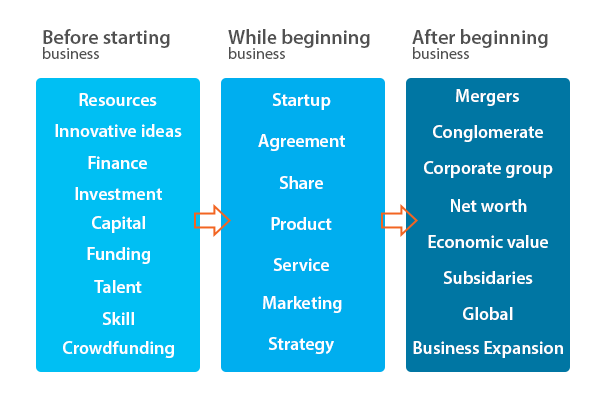
<style>
.page{position:relative;width:595px;height:420px;background:#ffffff}
.page>*{position:absolute;margin:0}
.t1{font:20px/14.8px "MyriadPro-Semibold";color:#515151}
.t2{font:16px/14.8px "MyriadPro-Regular";color:#515151}
.t3{font:18px "MyriadPro-Semibold";color:#ffffff}
</style>
<div class="page">
<p class="t1" style="left:43px;top:29px;width:127px;height:30px">Before starting<br><span class="t2">business</span></p>
<p class="t1" style="left:228px;top:29px;width:142px;height:30px">While beginning<br><span class="t2">business</span></p>
<p class="t1" style="left:412px;top:29px;width:136px;height:30px">After beginning<br><span class="t2">business</span></p>
<p class="t3" style="left:456px;top:89px;width:63px;height:17px">Mergers</p>
<p class="t3" style="left:79px;top:93px;width:78px;height:13px">Resources</p>
<p class="t3" style="left:272px;top:93px;width:59px;height:17px">Startup</p>
<p class="t3" style="left:55px;top:124px;width:127px;height:13px">Innovative ideas</p>
<p class="t3" style="left:433px;top:125px;width:110px;height:17px">Conglomerate</p>
<p class="t3" style="left:258px;top:134px;width:87px;height:17px">Agreement</p>
<p class="t3" style="left:88px;top:156px;width:59px;height:13px">Finance</p>
<p class="t3" style="left:424px;top:161px;width:129px;height:17px">Corporate group</p>
<p class="t3" style="left:279px;top:176px;width:44px;height:13px">Share</p>
<p class="t3" style="left:75px;top:187px;width:87px;height:13px">Investment</p>
<p class="t3" style="left:451px;top:199px;width:76px;height:13px">Net worth</p>
<p class="t3" style="left:92px;top:216px;width:53px;height:17px">Capital</p>
<p class="t3" style="left:271px;top:217px;width:61px;height:13px">Product</p>
<p class="t3" style="left:428px;top:235px;width:120px;height:13px">Economic value</p>
<p class="t3" style="left:87px;top:247px;width:63px;height:17px">Funding</p>
<p class="t3" style="left:273px;top:258px;width:56px;height:13px">Service</p>
<p class="t3" style="left:94px;top:280px;width:48px;height:13px">Talent</p>
<p class="t3" style="left:443px;top:271px;width:90px;height:13px">Subsidaries</p>
<p class="t3" style="left:263px;top:296px;width:79px;height:17px">Marketing</p>
<p class="t3" style="left:102px;top:312px;width:32px;height:13px">Skill</p>
<p class="t3" style="left:463px;top:307px;width:50px;height:13px">Global</p>
<p class="t3" style="left:63px;top:341px;width:111px;height:17px">Crowdfunding</p>
<p class="t3" style="left:268px;top:337px;width:66px;height:17px">Strategy</p>
<p class="t3" style="left:413px;top:341px;width:150px;height:17px">Business Expansion</p>
</div>
